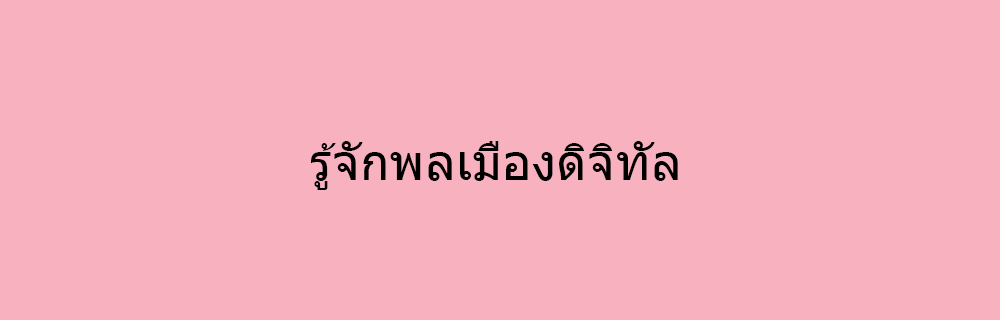
<style>
.page{position:relative;width:1000px;height:320px;background:#f8b1bf}
.page>*{position:absolute;margin:0}
.t1{font:50px "Tahoma";color:#000000}
</style>
<div class="page">
<p class="t1" style="left:311px;top:141px;width:367px;height:49px">รู้จักพลเมืองดิจิทัล</p>
</div>
